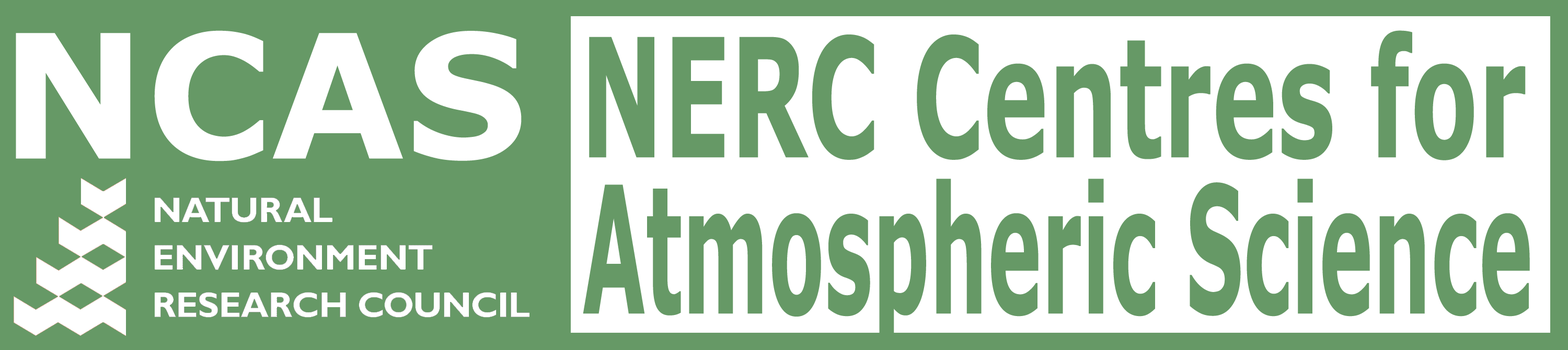
<style>
.page{position:relative;width:1568px;height:350px;background:#669966}
.page>*{position:absolute;margin:0}
.t1{font:172.5px "Verdana-Bold";color:#ffffff}
.t2{font:165.6px "Verdana-Bold";color:#669966;scale:0.59 1}
.t3{font:177.1px "Verdana-Bold";color:#669966;scale:0.46 1}
</style>
<div class="page">
<p class="t1" style="left:16px;top:30px;width:506px;height:132px">NCAS</p>
<p class="t2" style="left:589px;top:30px;width:937px;height:130px">NERC Centres for</p>
<p class="t3" style="left:583px;top:179px;width:947px;height:171px">Atmospheric Science</p>
</div>
